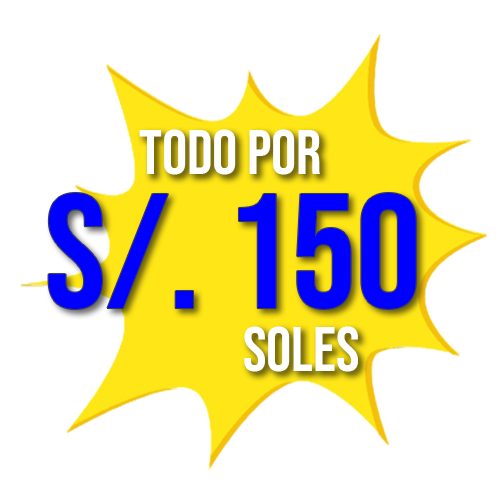
<style>
.page{position:relative;width:500px;height:500px;background:#ffffff}
.page>*{position:absolute;margin:0}
.t1{font:62.5px "BebasNeue-Regular";color:#ffffff}
.t2{font:162.6px "BebasNeue-Regular";color:#0000ff}
</style>
<div class="page">
<p class="t1" style="left:139px;top:129px;width:181px;height:46px">TODO POR</p>
<p class="t2" style="left:48px;top:193px;width:368px;height:116px">s/. 150</p>
<p class="t1" style="left:244px;top:326px;width:114px;height:46px">SOLES</p>
</div>
